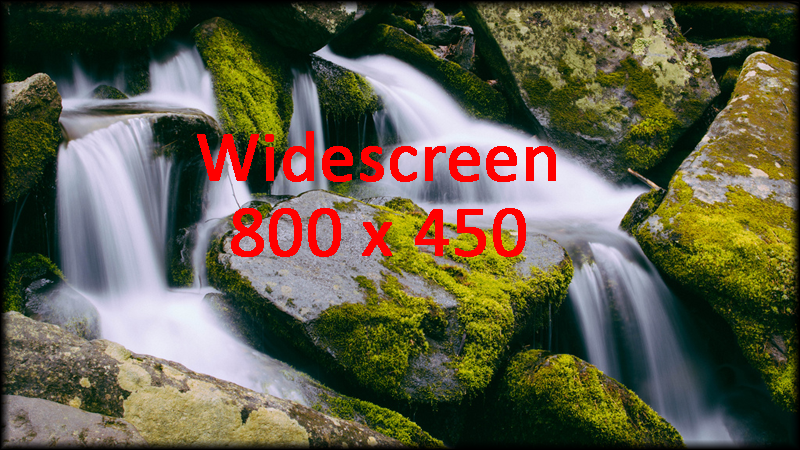
<style>
.page{position:relative;width:800px;height:450px}
.page>*{position:absolute;margin:0}
.t1{font:72px/75px "Calibri";color:#ff0000;font-weight:bold}
</style>
<div class="page">
<p class="t1" style="left:197px;top:131px;width:359px;height:126px;text-align:center">Widescreen<br>800 x 450</p>
</div>
